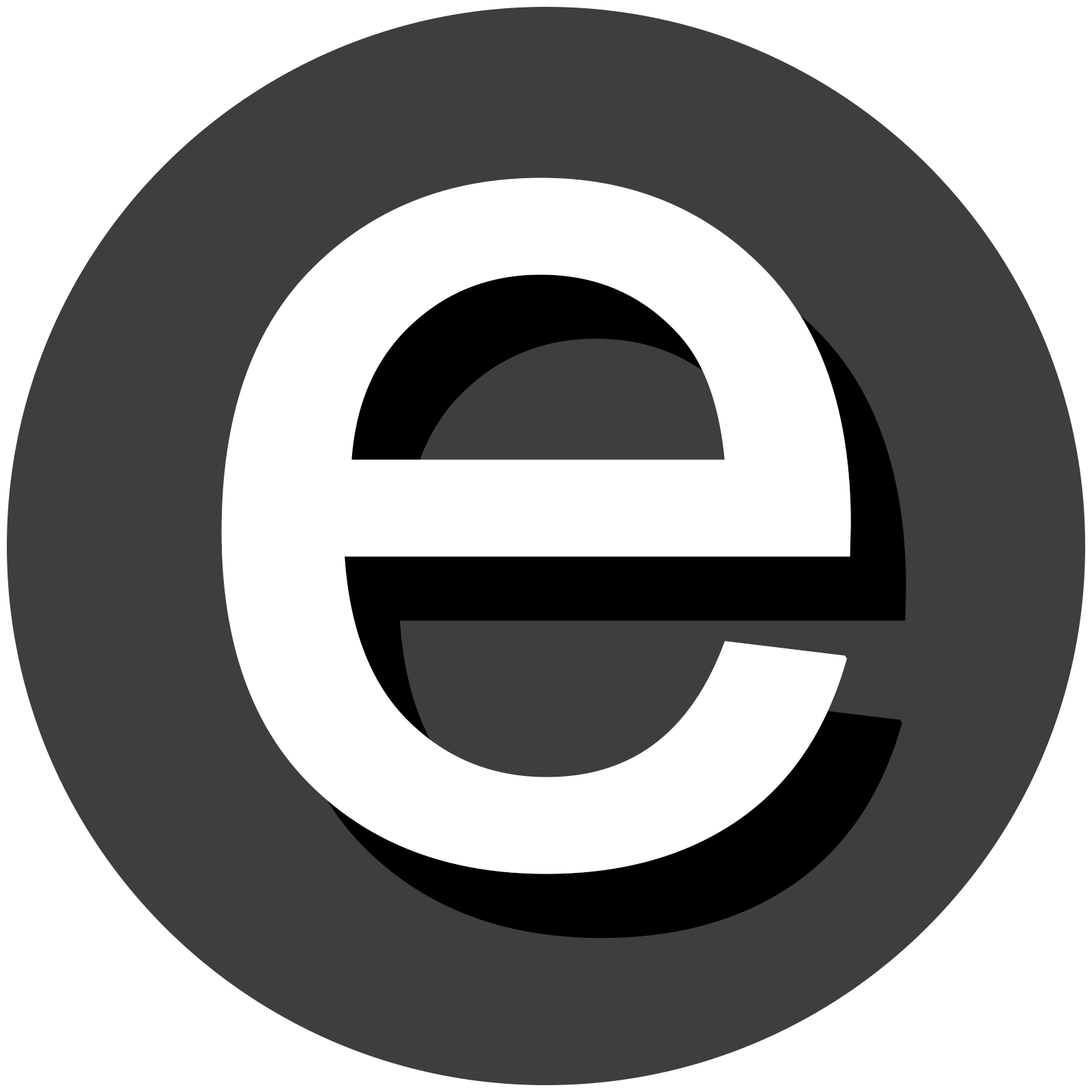
<style>
.page{position:relative;width:1092px;height:1092px;background:#3f3e3e}
.page>*{position:absolute;margin:0}
.t1{font:1274.1px "ArialNarrow";color:#ffffff;font-weight:bold;scale:1.25 1}
</style>
<div class="page">
<p class="t1" style="left:221px;top:177px;width:630px;height:697px">e</p>
</div>
